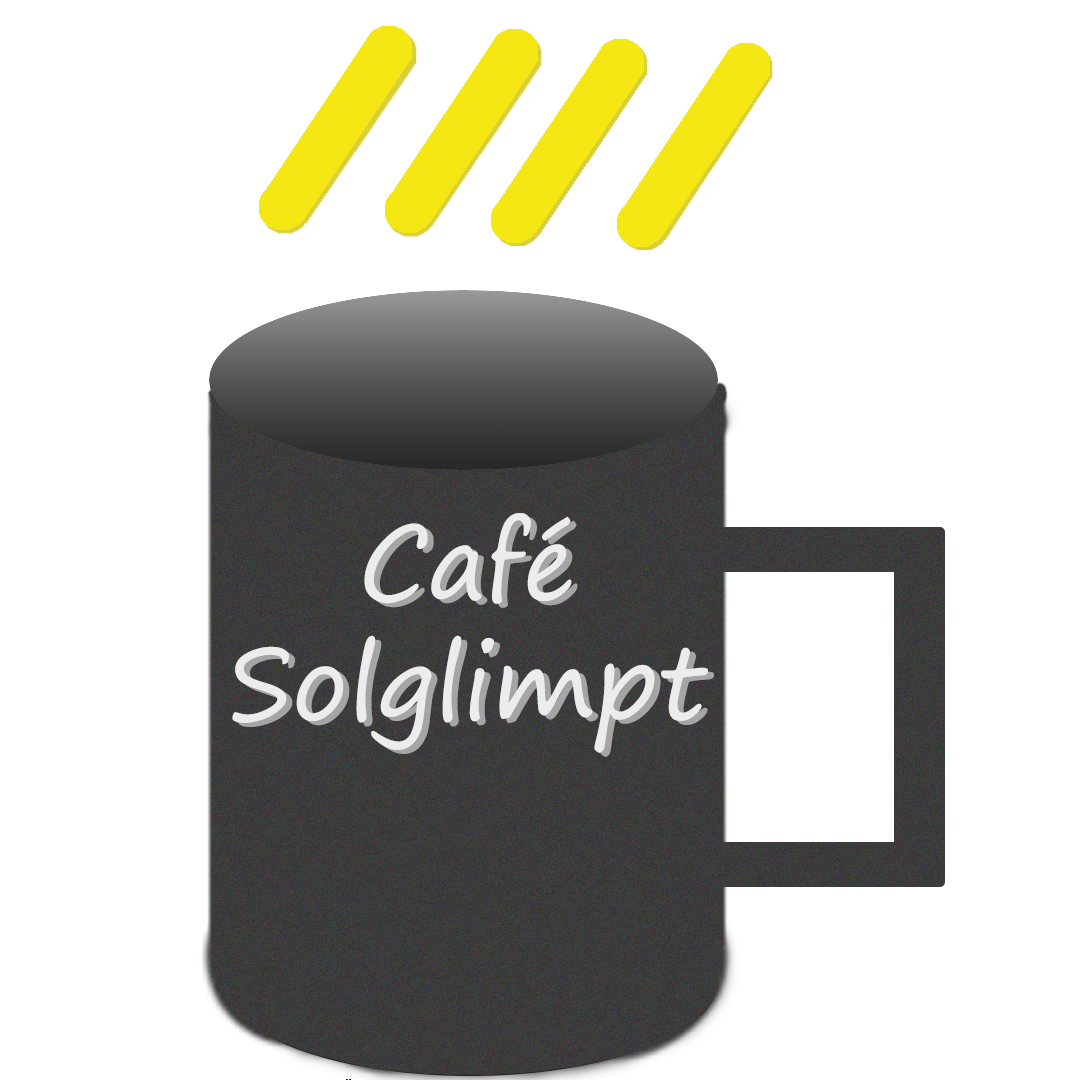
<style>
.page{position:relative;width:1080px;height:1080px;background:#ffffff}
.page>*{position:absolute;margin:0}
.t1{font:100px "SegoePrint";color:#ececec}
.t2{font:100px "SegoePrint";color:#a6a5a5}
</style>
<div class="page">
<p class="t1" style="left:232px;top:513px;width:476px;height:240px;text-align:center">Café<br>Solglimpt</p>
<p class="t2" style="left:238px;top:517px;width:476px;height:240px;text-align:center">Café<br>Solglimpt</p>
</div>
